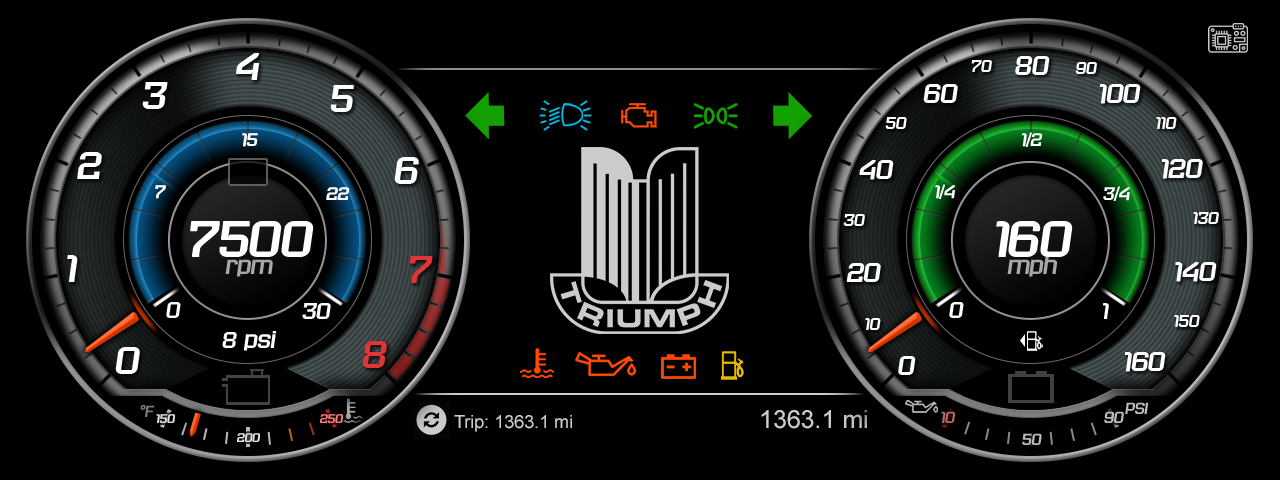
<style>
.page{position:relative;width:1280px;height:480px;background:#000000}
.page>*{position:absolute;margin:0}
.t1{font:33.6px "BladiTwo4FItalic";color:#ffffff}
.t2{font:15px "BladiTwo4FItalic";color:#ffffff}
.t3{font:24px "BladiTwo4FItalic";color:#ffffff}
.t4{font:16px "BladiTwo4F-Italic";color:#ffffff}
.t5{font:16px "BladiTwo4FItalic";color:#ffffff}
.t6{font:45px "BladiTwo4FItalic";color:#ffffff}
.t7{font:33.6px "BladiTwo4FItalic";color:#e03636}
.t8{font:20.7px "BladiTwo4FItalic";color:#a8a8a8}
.t9{font:20px "BladiTwo4FItalic";color:#ffffff}
.t10{font:14px "BladiTwo4FItalic";color:#7d7d7d}
.t11{font:11px "BladiTwo4F-Italic";color:#e3e3e3}
.t12{font:11px "BladiTwo4F-Italic";color:#ff7a7a}
.t13{font:25px "ArialMT";color:#cccccc}
.t14{font:14px "BladiTwo4FItalic";color:#bd6464}
.t15{font:14px "BladiTwo4FItalic";color:#bdbdbd}
.t16{font:18px "ArialMT";color:#cccccc}
.t17{font:11px "BladiTwo4F-Italic";color:#e4e4e4}
</style>
<div class="page">
<p class="t1" style="left:236px;top:53px;width:24px;height:27px">4</p>
<p class="t2" style="left:971px;top:60px;width:21px;height:12px">70</p>
<p class="t3" style="left:1015px;top:56px;width:35px;height:19px">80</p>
<p class="t2" style="left:1075px;top:62px;width:22px;height:12px">90</p>
<p class="t1" style="left:142px;top:82px;width:26px;height:27px">3</p>
<p class="t1" style="left:330px;top:85px;width:24px;height:27px">5</p>
<p class="t3" style="left:923px;top:84px;width:35px;height:19px">60</p>
<p class="t3" style="left:1099px;top:84px;width:42px;height:20px">100</p>
<p class="t2" style="left:885px;top:117px;width:22px;height:12px">50</p>
<p class="t2" style="left:1156px;top:117px;width:21px;height:12px">110</p>
<p class="t4" style="left:242px;top:133px;width:16px;height:14px">15</p>
<p class="t5" style="left:1022px;top:132px;width:21px;height:15px">1/2</p>
<p class="t1" style="left:77px;top:152px;width:25px;height:27px">2</p>
<p class="t1" style="left:394px;top:157px;width:25px;height:27px">6</p>
<p class="t3" style="left:859px;top:160px;width:35px;height:20px">40</p>
<p class="t3" style="left:1161px;top:159px;width:42px;height:20px">120</p>
<p class="t4" style="left:155px;top:185px;width:11px;height:14px">7</p>
<p class="t5" style="left:935px;top:184px;width:20px;height:15px">1/4</p>
<p class="t4" style="left:326px;top:187px;width:24px;height:13px">22</p>
<p class="t5" style="left:1103px;top:186px;width:27px;height:15px">3/4</p>
<p class="t6" style="left:190px;top:221px;width:124px;height:36px">7500</p>
<p class="t2" style="left:843px;top:214px;width:22px;height:12px">30</p>
<p class="t6" style="left:996px;top:221px;width:77px;height:36px">160</p>
<p class="t2" style="left:1193px;top:212px;width:26px;height:12px">130</p>
<p class="t1" style="left:67px;top:255px;width:11px;height:27px">1</p>
<p class="t7" style="left:409px;top:256px;width:24px;height:27px">7</p>
<p class="t8" style="left:1007px;top:256px;width:50px;height:21px">mph</p>
<p class="t8" style="left:225px;top:259px;width:48px;height:18px">rpm</p>
<p class="t3" style="left:846px;top:263px;width:35px;height:19px">20</p>
<p class="t3" style="left:1175px;top:262px;width:42px;height:20px">140</p>
<p class="t9" style="left:166px;top:302px;width:15px;height:16px">0</p>
<p class="t9" style="left:302px;top:303px;width:29px;height:16px">30</p>
<p class="t9" style="left:949px;top:302px;width:15px;height:16px">0</p>
<p class="t9" style="left:1103px;top:303px;width:6px;height:16px">1</p>
<p class="t2" style="left:865px;top:318px;width:16px;height:12px">10</p>
<p class="t2" style="left:1174px;top:315px;width:26px;height:12px">150</p>
<p class="t9" style="left:222px;top:331px;width:54px;height:20px">8 psi</p>
<p class="t7" style="left:362px;top:341px;width:25px;height:27px">8</p>
<p class="t1" style="left:115px;top:347px;width:25px;height:27px">0</p>
<p class="t3" style="left:1124px;top:352px;width:42px;height:20px">160</p>
<p class="t3" style="left:898px;top:356px;width:18px;height:19px">0</p>
<p class="t10" style="left:140px;top:405px;width:15px;height:12px">°F</p>
<p class="t11" style="left:156px;top:414px;width:19px;height:9px">150</p>
<p class="t12" style="left:320px;top:414px;width:23px;height:9px">250</p>
<p class="t13" style="left:761px;top:410px;width:106px;height:19px">1363.1 mi</p>
<p class="t14" style="left:941px;top:411px;width:15px;height:12px">10</p>
<p class="t15" style="left:1104px;top:411px;width:20px;height:12px">90</p>
<p class="t15" style="left:1125px;top:402px;width:23px;height:12px">PSI</p>
<p class="t16" style="left:454px;top:415px;width:118px;height:17px">Trip: 1363.1 mi</p>
<p class="t17" style="left:237px;top:433px;width:23px;height:9px">200</p>
<p class="t15" style="left:1022px;top:433px;width:20px;height:12px">50</p>
</div>
